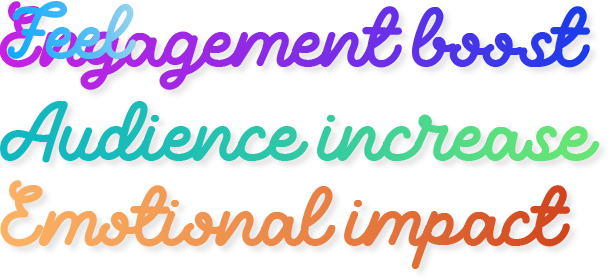
<style>
.page{position:relative;width:611px;height:279px;background:#ffffff}
.page>*{position:absolute;margin:0}
.t1{font:71.9px "Bumbbled"}
.t2{font:65.4px "Bumbbled"}
</style>
<div class="page">
<p class="t1" style="left:0px;top:1px;width:590px;height:89px">Engagement boost</p>
<p class="t2" style="left:7px;top:1px;width:129px;height:58px">Feel</p>
<p class="t1" style="left:0px;top:101px;width:600px;height:62px">Audience increase</p>
<p class="t1" style="left:0px;top:180px;width:570px;height:89px">Emotional impact</p>
</div>
